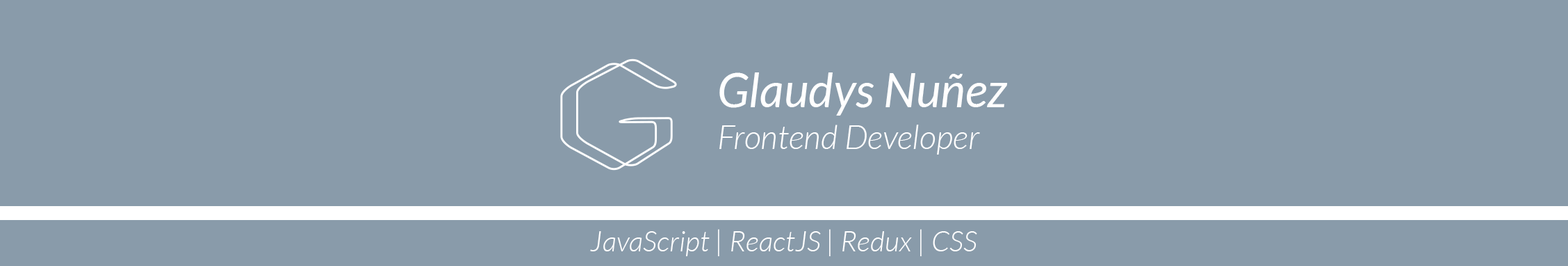
<style>
.page{position:relative;width:1568px;height:266px;background:#899baa}
.page>*{position:absolute;margin:0}
.t1{font:47.1px "Lato-Italic";color:#ffffff}
.t2{font:33.4px "Lato-LightItalic";color:#ffffff}
.t3{font:28.8px "Lato-LightItalic";color:#ffffff}
</style>
<div class="page">
<p class="t1" style="left:719px;top:72px;width:289px;height:43px">Glaudys Nuñez</p>
<p class="t2" style="left:719px;top:124px;width:261px;height:30px">Frontend Developer</p>
<p class="t3" style="left:590px;top:229px;width:387px;height:27px">JavaScript | ReactJS | Redux | CSS</p>
</div>
